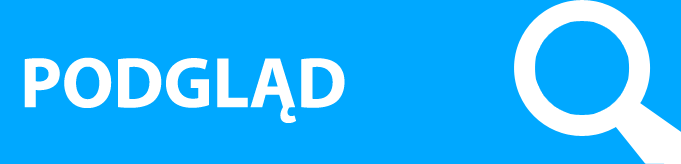
<style>
.page{position:relative;width:681px;height:164px;background:#00a8ff}
.page>*{position:absolute;margin:0}
.t1{font:72px "MyriadPro-Bold";color:#ffffff}
</style>
<div class="page">
<p class="t1" style="left:24px;top:57px;width:321px;height:66px">PODGLĄD</p>
</div>
